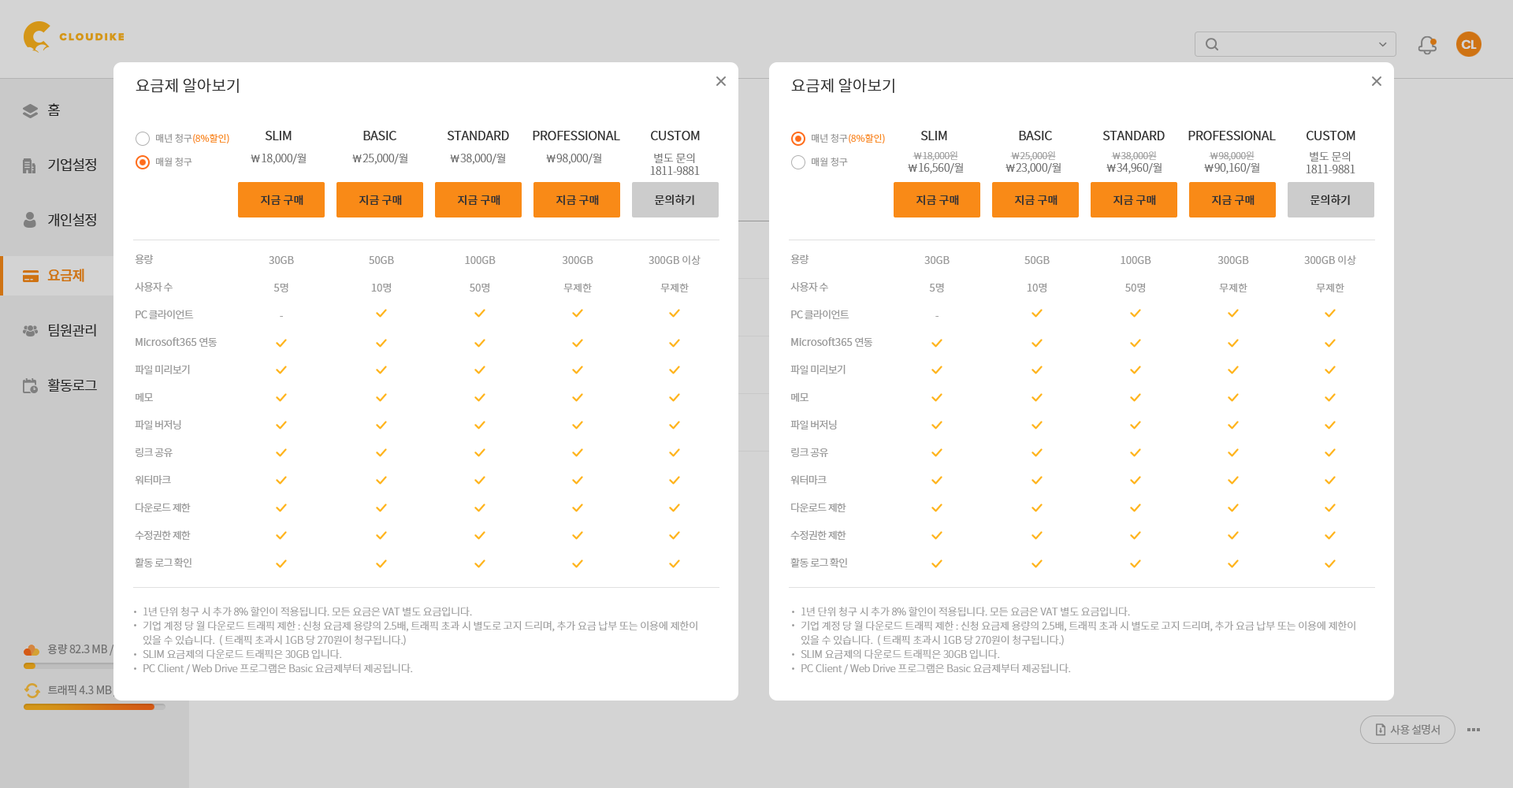
<style>
.page{position:relative;width:1513px;height:788px;background:#ffffff}
.page>*{position:absolute;margin:0}
.t1{font:15.8px "NotoSansCJKkr-DemiLight";color:#333333}
.t2{font:9.5px "NotoSansCJKkr-DemiLight";color:#f98a17}
.t3{font:9.5px "NotoSansCJKkr-DemiLight";color:#999999}
.t4{font:12.6px "NotoSansCJKkr-Regular";letter-spacing:-0.025em;color:#333333}
.t5{font:11px "NotoSansCJKkr-Light";letter-spacing:-0.01em;color:#666666}
.t6{font:11px/12.6px "NotoSansCJKkr-Light";letter-spacing:-0.01em;color:#666666}
.t7{font:9.5px/12.6px "NotoSansCJKkr-Light";letter-spacing:-0.01em;color:#999999}
.t8{font:11px "NotoSansCJKkr-Medium";color:#333333}
.t9{font:10.2px/27.6px "NotoSansCJKkr-Regular";letter-spacing:-0.05em;color:#999999}
.t10{font:10.2px/27.6px "NotoSansCJKkr-Regular";color:#999999}
.t11{font:10.2px/14.2px "NotoSansCJKkr-Light";letter-spacing:-0.01em;color:#999999}
</style>
<div class="page">
<p class="t1" style="left:136px;top:78px;width:103px;height:15px">요금제 알아보기</p>
<p class="t1" style="left:791px;top:78px;width:103px;height:15px">요금제 알아보기</p>
<p class="t2" style="left:156px;top:133px;width:73px;height:11px"><span class="t3">매년 청구</span>(8%할인)</p>
<p class="t4" style="left:265px;top:131px;width:27px;height:9px">SLIM</p>
<p class="t4" style="left:363px;top:131px;width:33px;height:9px">BASIC</p>
<p class="t4" style="left:447px;top:131px;width:62px;height:9px">STANDARD</p>
<p class="t4" style="left:533px;top:131px;width:87px;height:9px">PROFESSIONAL</p>
<p class="t4" style="left:651px;top:131px;width:49px;height:9px">CUSTOM</p>
<p class="t2" style="left:812px;top:133px;width:73px;height:11px"><span class="t3">매년 청구</span>(8%할인)</p>
<p class="t4" style="left:920px;top:131px;width:27px;height:9px">SLIM</p>
<p class="t4" style="left:1019px;top:131px;width:33px;height:9px">BASIC</p>
<p class="t4" style="left:1103px;top:131px;width:62px;height:9px">STANDARD</p>
<p class="t4" style="left:1188px;top:131px;width:88px;height:9px">PROFESSIONAL</p>
<p class="t4" style="left:1307px;top:131px;width:48px;height:9px">CUSTOM</p>
<p class="t3" style="left:156px;top:157px;width:36px;height:9px">매월 청구</p>
<p class="t5" style="left:251px;top:153px;width:56px;height:12px">￦18,000/월</p>
<p class="t5" style="left:352px;top:153px;width:56px;height:12px">￦25,000/월</p>
<p class="t5" style="left:450px;top:153px;width:56px;height:12px">￦38,000/월</p>
<p class="t5" style="left:546px;top:153px;width:56px;height:12px">￦98,000/월</p>
<p class="t6" style="left:650px;top:153px;width:50px;height:22px;text-align:center">별도 문의<br>1811-9881</p>
<p class="t3" style="left:812px;top:157px;width:36px;height:9px">매월 청구</p>
<p class="t6" style="left:908px;top:151px;width:56px;height:23px;text-align:center"><span class="t7">￦18,000원<br></span>￦16,560/월</p>
<p class="t6" style="left:1006px;top:151px;width:56px;height:23px;text-align:center"><span class="t7">￦25,000원<br></span>￦23,000/월</p>
<p class="t6" style="left:1106px;top:151px;width:56px;height:23px;text-align:center"><span class="t7">￦38,000원<br></span>￦34,960/월</p>
<p class="t6" style="left:1204px;top:151px;width:56px;height:23px;text-align:center"><span class="t7">￦98,000원<br></span>￦90,160/월</p>
<p class="t6" style="left:1306px;top:151px;width:49px;height:22px;text-align:center">별도 문의<br>1811-9881</p>
<p class="t8" style="left:261px;top:195px;width:42px;height:11px">지금 구매</p>
<p class="t8" style="left:359px;top:195px;width:43px;height:11px">지금 구매</p>
<p class="t8" style="left:458px;top:195px;width:42px;height:11px">지금 구매</p>
<p class="t8" style="left:556px;top:195px;width:43px;height:11px">지금 구매</p>
<p class="t8" style="left:655px;top:195px;width:39px;height:11px">문의하기</p>
<p class="t8" style="left:917px;top:195px;width:42px;height:11px">지금 구매</p>
<p class="t8" style="left:1015px;top:195px;width:43px;height:11px">지금 구매</p>
<p class="t8" style="left:1114px;top:195px;width:42px;height:11px">지금 구매</p>
<p class="t8" style="left:1212px;top:195px;width:43px;height:11px">지금 구매</p>
<p class="t8" style="left:1311px;top:195px;width:39px;height:11px">문의하기</p>
<p class="t9" style="left:135px;top:255px;width:82px;height:313px">용량<br>사용자 수<br>PC 클라이언트<br><span class="t10">Microsoft365 </span>연동<br>파일 미리보기<br>메모<br>파일 버저닝<br>링크 공유<br>워터마크<br>다운로드 제한<br>수정권한 제한<br>활동 로그 확인</p>
<p class="t10" style="left:269px;top:256px;width:25px;height:61px;text-align:center">30GB<br>5명<br>-</p>
<p class="t10" style="left:369px;top:256px;width:25px;height:36px;text-align:center">50GB<br>10명</p>
<p class="t10" style="left:465px;top:256px;width:31px;height:36px;text-align:center">100GB<br>50명</p>
<p class="t10" style="left:562px;top:256px;width:31px;height:36px;text-align:center">300GB<br>무제한</p>
<p class="t10" style="left:649px;top:255px;width:52px;height:37px;text-align:center">300GB 이상<br>무제한</p>
<p class="t9" style="left:790px;top:255px;width:82px;height:313px">용량<br>사용자 수<br>PC 클라이언트<br><span class="t10">Microsoft365 </span>연동<br>파일 미리보기<br>메모<br>파일 버저닝<br>링크 공유<br>워터마크<br>다운로드 제한<br>수정권한 제한<br>활동 로그 확인</p>
<p class="t10" style="left:924px;top:256px;width:26px;height:61px;text-align:center">30GB<br>5명<br>-</p>
<p class="t10" style="left:1024px;top:256px;width:26px;height:36px;text-align:center">50GB<br>10명</p>
<p class="t10" style="left:1121px;top:256px;width:30px;height:36px;text-align:center">100GB<br>50명</p>
<p class="t10" style="left:1218px;top:256px;width:31px;height:36px;text-align:center">300GB<br>무제한</p>
<p class="t10" style="left:1304px;top:255px;width:52px;height:37px;text-align:center">300GB 이상<br>무제한</p>
<p class="t11" style="left:143px;top:607px;width:554px;height:68px">1년 단위 청구 시 추가 8% 할인이 적용됩니다. 모든 요금은 VAT 별도 요금입니다.<br>기업 계정 당 월 다운로드 트래픽 제한 : 신청 요금제 용량의 2.5배, 트래픽 초과 시 별도로 고지 드리며, 추가 요금 납부 또는 이용에 제한이 <br>있을 수 있습니다.  ( 트래픽 초과시 1GB 당 270원이 청구됩니다.)<br>SLIM 요금제의 다운로드 트래픽은 30GB 입니다.<br>PC Client / Web Drive 프로그램은 Basic 요금제부터 제공됩니다.</p>
<p class="t11" style="left:801px;top:607px;width:554px;height:68px">1년 단위 청구 시 추가 8% 할인이 적용됩니다. 모든 요금은 VAT 별도 요금입니다.<br>기업 계정 당 월 다운로드 트래픽 제한 : 신청 요금제 용량의 2.5배, 트래픽 초과 시 별도로 고지 드리며, 추가 요금 납부 또는 이용에 제한이 <br>있을 수 있습니다.  ( 트래픽 초과시 1GB 당 270원이 청구됩니다.)<br>SLIM 요금제의 다운로드 트래픽은 30GB 입니다.<br>PC Client / Web Drive 프로그램은 Basic 요금제부터 제공됩니다.</p>
</div>
